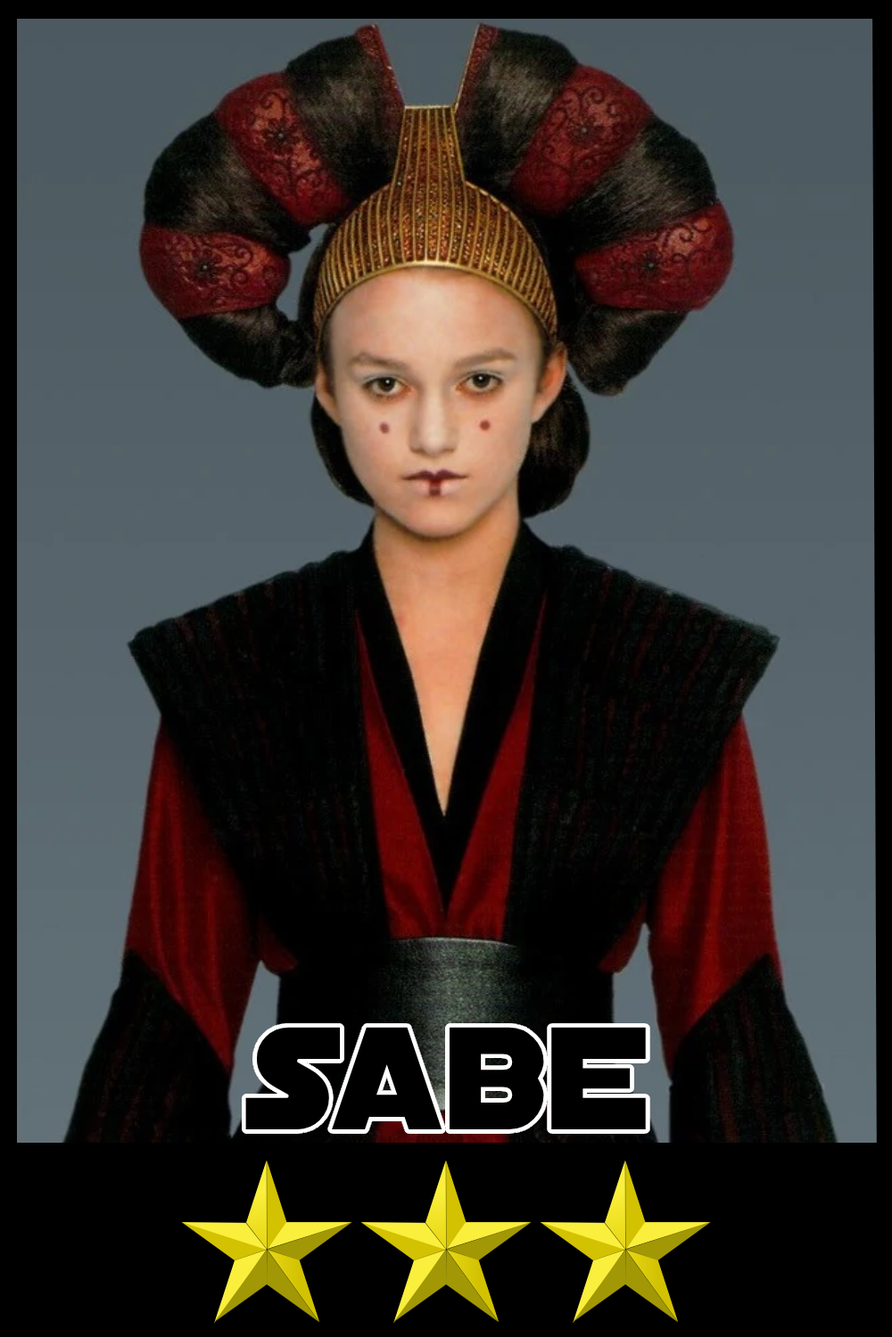
<style>
.page{position:relative;width:892px;height:1337px}
.page>*{position:absolute;margin:0}
.t1{font:156.7px "DistantGalaxy";color:#000000}
</style>
<div class="page">
<p class="t1" style="left:245px;top:1027px;width:401px;height:103px">sabe</p>
</div>
